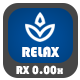
<style>
.page{position:relative;width:80px;height:80px;background:#464646}
.page>*{position:absolute;margin:0}
.t1{font:15px "Bauhaus93";color:#ffffff}
.t2{font:12px "Bauhaus93";color:#ffffff}
</style>
<div class="page">
<p class="t1" style="left:22px;top:46px;width:38px;height:11px">RELAX</p>
<p class="t2" style="left:16px;top:65px;width:47px;height:10px">RX 0.00x</p>
</div>
